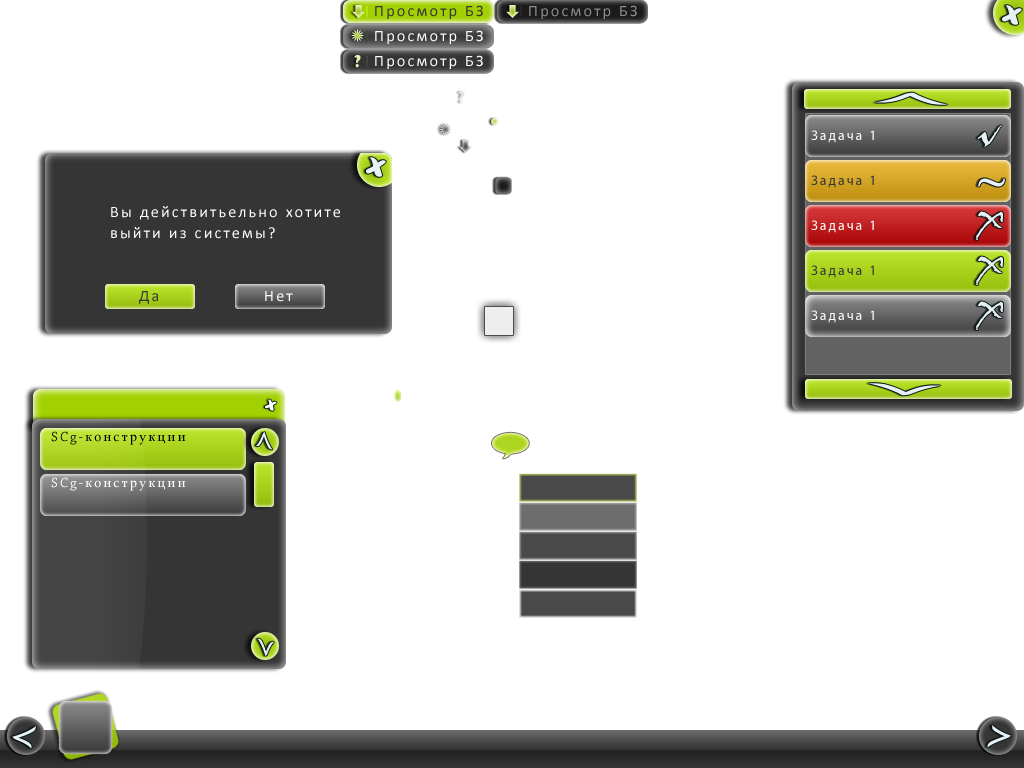
<style>
.page{position:relative;width:1024px;height:768px;background:#ffffff}
.page>*{position:absolute;margin:0}
.t1{font:16px "Calibri";letter-spacing:0.14em;color:#353535}
.t2{font:16px "Calibri";letter-spacing:0.14em;color:#8e8e8e}
.t3{font:36px "ForteMT";letter-spacing:0.14em;color:#e9eff5}
.t4{font:16px "Calibri";letter-spacing:0.14em;color:#ffffff}
.t5{font:16px "GoudyStout";letter-spacing:0.14em;color:#e5f2b9}
.t6{font:128.6px "LucidaHandwriting-Italic";letter-spacing:0.14em;color:#e9eff5;scale:0.16 1}
.t7{font:50px "JohnHandyLetPlain";letter-spacing:0.14em;color:#e9eff5}
.t8{font:14px "MyriadPro-Regular";letter-spacing:0.14em;color:#ffffff}
.t9{font:14px "MyriadPro-Regular";letter-spacing:0.14em;color:#353535}
.t10{font:50px "ImprintMT-Shadow";letter-spacing:0.14em;color:#e9eff5}
.t11{font:16px/21px "Calibri";letter-spacing:0.14em;color:#ffffff}
.t12{font:20px "ForteMT";letter-spacing:0.14em;color:#ffffff}
.t13{font:14px "Sylfaen";letter-spacing:0.14em;color:#000000}
.t14{font:14px "ChaparralPro-Regular";letter-spacing:0.14em;color:#000000}
.t15{font:29.5px "LucidaHandwriting-Italic";letter-spacing:0.14em;color:#e9eff5}
.t16{font:14px "Sylfaen";letter-spacing:0.14em;color:#ffffff}
.t17{font:14px "ChaparralPro-Regular";letter-spacing:0.14em;color:#ffffff}
.t18{font:40px "LucidaHandwriting-Italic";letter-spacing:0.14em;color:#e9eff5}
</style>
<div class="page">
<p class="t1" style="left:375px;top:5px;width:108px;height:14px">Просмотр БЗ</p>
<p class="t2" style="left:529px;top:5px;width:108px;height:14px">Просмотр БЗ</p>
<p class="t3" style="left:1002px;top:5px;width:20px;height:20px;rotate:15deg">x</p>
<p class="t4" style="left:375px;top:30px;width:108px;height:14px">Просмотр БЗ</p>
<p class="t5" style="left:354px;top:55px;width:7px;height:13px">?</p>
<p class="t4" style="left:375px;top:55px;width:108px;height:14px">Просмотр БЗ</p>
<p class="t6" style="left:875px;top:92px;width:73px;height:13px;rotate:90deg">&lt;</p>
<p class="t7" style="left:977px;top:125px;width:25px;height:22px">v</p>
<p class="t8" style="left:811px;top:130px;width:63px;height:13px">Задача 1</p>
<p class="t3" style="left:366px;top:157px;width:20px;height:20px;rotate:15deg">x</p>
<p class="t9" style="left:811px;top:175px;width:63px;height:13px">Задача 1</p>
<p class="t10" style="left:978px;top:178px;width:27px;height:9px">~</p>
<p class="t11" style="left:111px;top:206px;width:229px;height:33px">Вы действитьельно хотите<br>выйти из системы?</p>
<p class="t8" style="left:811px;top:220px;width:63px;height:13px">Задача 1</p>
<p class="t7" style="left:975px;top:211px;width:29px;height:29px">x</p>
<p class="t7" style="left:975px;top:256px;width:29px;height:29px">x</p>
<p class="t9" style="left:811px;top:265px;width:63px;height:13px">Задача 1</p>
<p class="t1" style="left:139px;top:291px;width:19px;height:13px">Да</p>
<p class="t4" style="left:265px;top:291px;width:28px;height:11px">Нет</p>
<p class="t7" style="left:975px;top:301px;width:29px;height:29px">x</p>
<p class="t8" style="left:811px;top:310px;width:63px;height:13px">Задача 1</p>
<p class="t6" style="left:868px;top:383px;width:73px;height:13px;rotate:-90deg">&lt;</p>
<p class="t12" style="left:265px;top:399px;width:12px;height:12px;rotate:20deg">x</p>
<p class="t13" style="left:51px;top:431px;width:135px;height:14px"><span class="t14">SCg-</span>конструкции</p>
<p class="t15" style="left:256px;top:432px;width:17px;height:18px;rotate:90deg">&lt;</p>
<p class="t16" style="left:51px;top:477px;width:135px;height:14px"><span class="t17">SCg-</span>конструкции</p>
<p class="t15" style="left:257px;top:638px;width:17px;height:18px;rotate:-90deg">&lt;</p>
<p class="t18" style="left:12px;top:726px;width:24px;height:23px">&lt;</p>
<p class="t18" style="left:987px;top:725px;width:24px;height:23px">&gt;</p>
</div>
